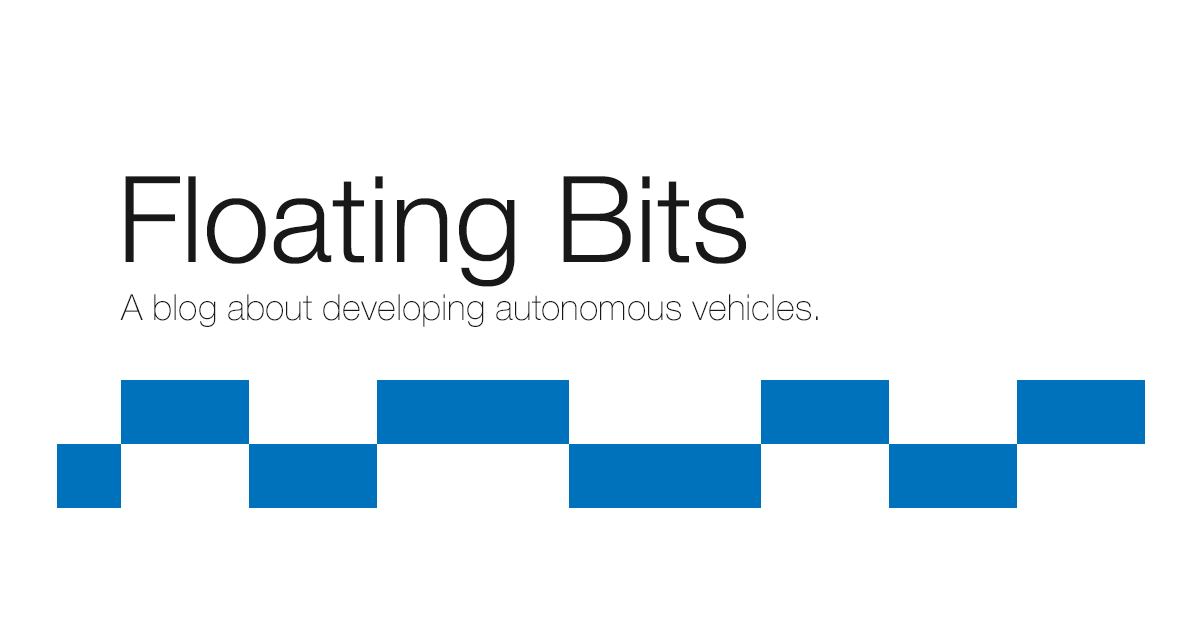
<style>
.page{position:relative;width:1200px;height:630px;background:#ffffff}
.page>*{position:absolute;margin:0}
.t1{font:120px "HelveticaNeue-Light";color:#181818}
.t2{font:36px "HelveticaNeue-Thin";color:#181818}
</style>
<div class="page">
<p class="t1" style="left:125px;top:176px;width:621px;height:111px">Floating Bits</p>
<p class="t2" style="left:120px;top:294px;width:698px;height:33px">A blog about developing autonomous vehicles.</p>
</div>
